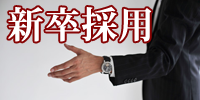
<style>
.page{position:relative;width:200px;height:100px}
.page>*{position:absolute;margin:0}
.t1{font:36px "KozMinPr6N-Bold";color:#ffffff;font-weight:bold}
</style>
<div class="page">
<p class="t1" style="left:8px;top:6px;width:144px;height:36px">新卒採用</p>
</div>
